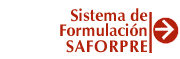
<style>
.page{position:relative;width:180px;height:59px;background:#ffffff}
.page>*{position:absolute;margin:0}
.t1{font:17px/15px "ZapfHumanist601BT-Bold";color:#b2220a;scale:0.95 1}
.t2{font:17px/16px "ZapfHumanist601BT-Bold";letter-spacing:0.05em;color:#b2220a;scale:0.95 1}
</style>
<div class="page">
<p class="t1" style="left:60px;top:8px;width:88px;height:45px;text-align:right">Sistema de<br>Formulación<br><span class="t2">SAFORPRE</span></p>
</div>
